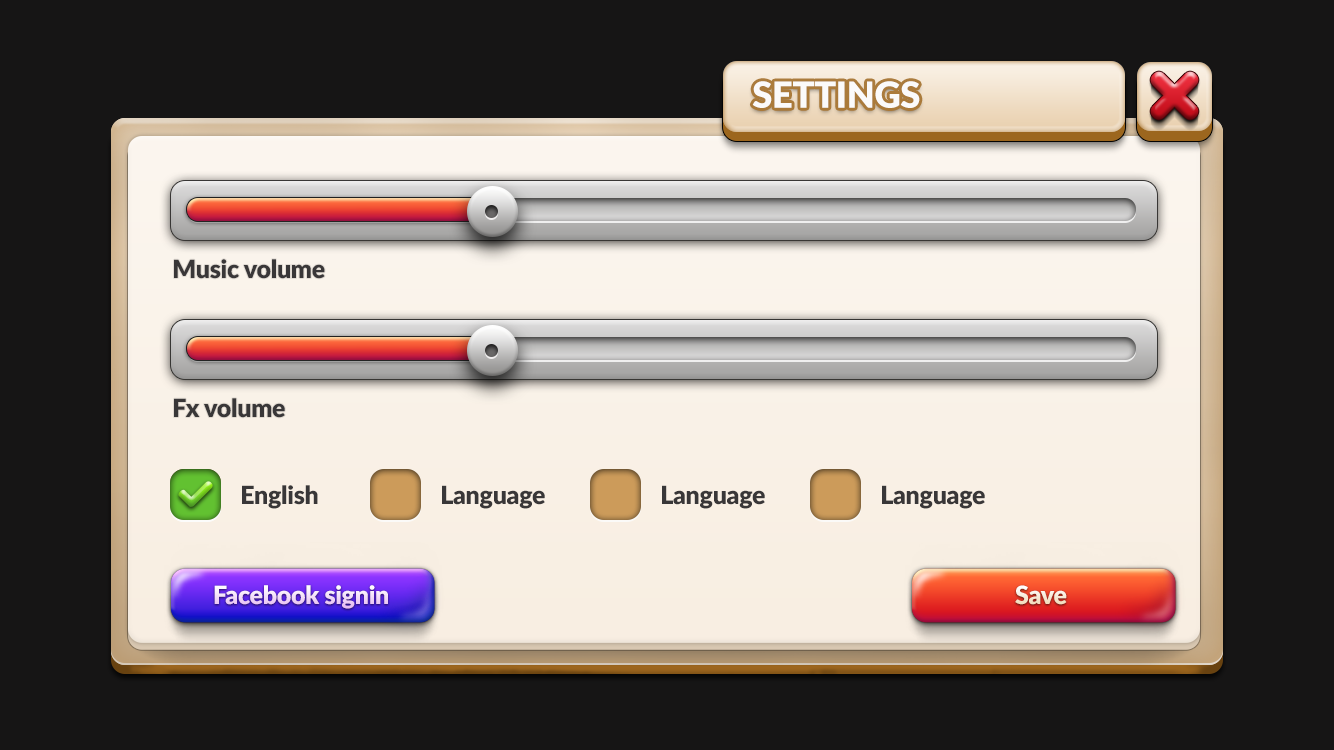
<style>
.page{position:relative;width:1334px;height:750px;background:#161515}
.page>*{position:absolute;margin:0}
.t1{font:36.2px "Lato-Black";letter-spacing:-0.01em;color:#fbfafa}
.t2{font:24.9px "Lato-Black";letter-spacing:-0.01em;color:#393738}
.t3{font:24.9px "Lato-Black";letter-spacing:-0.01em;color:#f3dff9}
.t4{font:24.9px "Lato-Black";letter-spacing:-0.01em}
</style>
<div class="page">
<p class="t1" style="left:752px;top:81px;width:168px;height:27px">SETTINGS</p>
<p class="t2" style="left:174px;top:259px;width:151px;height:20px">Music volume</p>
<p class="t2" style="left:174px;top:398px;width:111px;height:20px">Fx volume</p>
<p class="t2" style="left:242px;top:485px;width:76px;height:24px">English</p>
<p class="t2" style="left:442px;top:485px;width:103px;height:24px">Language</p>
<p class="t2" style="left:662px;top:485px;width:103px;height:24px">Language</p>
<p class="t2" style="left:882px;top:485px;width:103px;height:24px">Language</p>
<p class="t3" style="left:214px;top:585px;width:174px;height:24px">Facebook signin</p>
<p class="t4" style="left:1015px;top:585px;width:52px;height:20px">Save</p>
</div>
